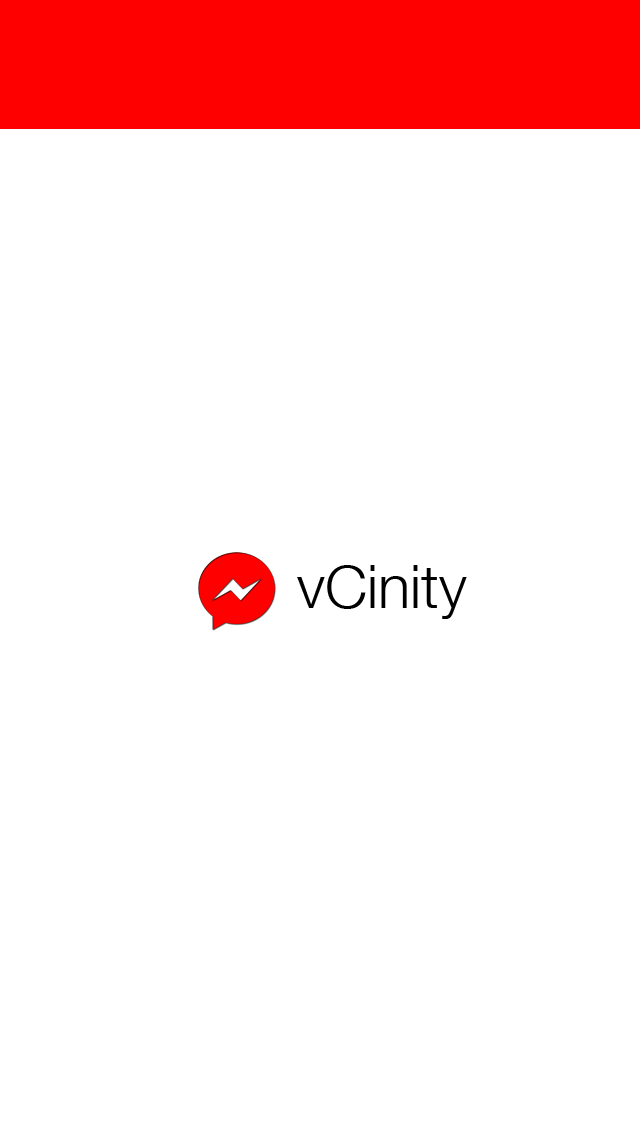
<style>
.page{position:relative;width:640px;height:1136px;background:#ffffff}
.page>*{position:absolute;margin:0}
.t1{font:60px "HelveticaNeue-Light";color:#000000}
</style>
<div class="page">
<p class="t1" style="left:297px;top:565px;width:170px;height:54px">vCinity</p>
</div>
